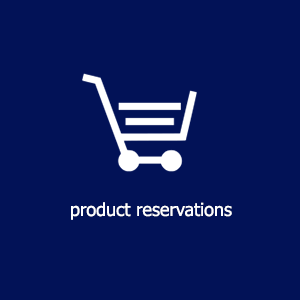
<style>
.page{position:relative;width:300px;height:300px;background:#021257}
.page>*{position:absolute;margin:0}
.t1{font:18px "Tahoma";color:#ffffff}
</style>
<div class="page">
<p class="t1" style="left:71px;top:202px;width:161px;height:18px">product reservations</p>
</div>
